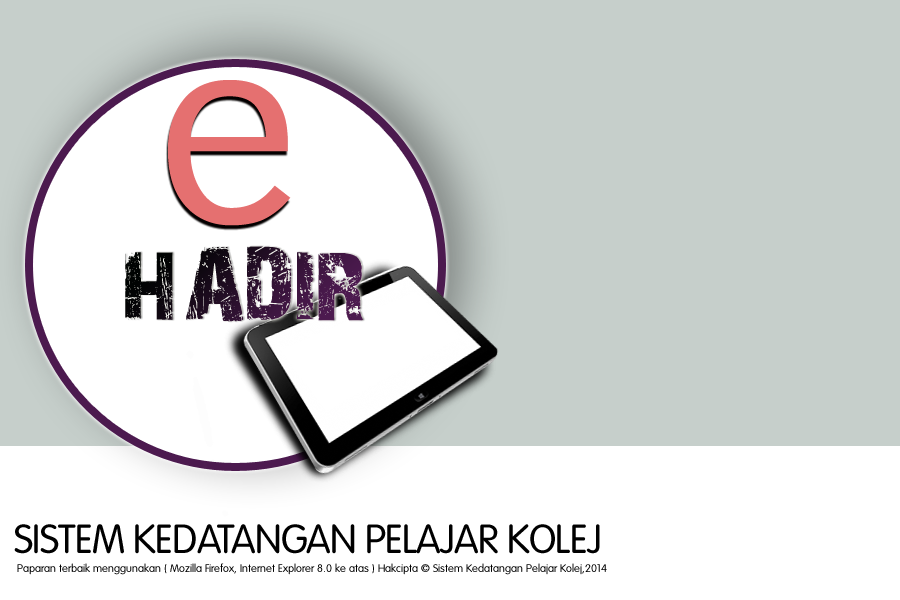
<style>
.page{position:relative;width:900px;height:600px;background:#c6cfcb}
.page>*{position:absolute;margin:0}
.t1{font:266.7px "EuphemiaCAS";letter-spacing:-0.1em;color:#e57070;scale:1.03 1}
.t2{font:96px "28DaysLater";text-transform:uppercase;scale:1.03 1}
.t3{font:40px "VAGRoundedStd-Light";letter-spacing:-0.02em;color:#000000;text-transform:uppercase}
.t4{font:11px "VAGRoundedStd-Light";color:#000000}
.t5{font:11px "ArialUnicodeMS";color:#000000}
</style>
<div class="page">
<p class="t1" style="left:167px;top:80px;width:124px;height:146px">e</p>
<p class="t2" style="left:125px;top:246px;width:239px;height:76px">HADIR</p>
<p class="t3" style="left:14px;top:524px;width:586px;height:30px">SISTEM KEDATANGAN PELAJAR KOLEJ</p>
<p class="t4" style="left:17px;top:563px;width:590px;height:12px"><span class="t5"><br></span>Paparan terbaik menggunakan ( Mozilla Firefox, Internet Explorer 8.0 ke atas ) Hakcipta © Sistem Kedatangan Pelajar Kolej,2014</p>
</div>
